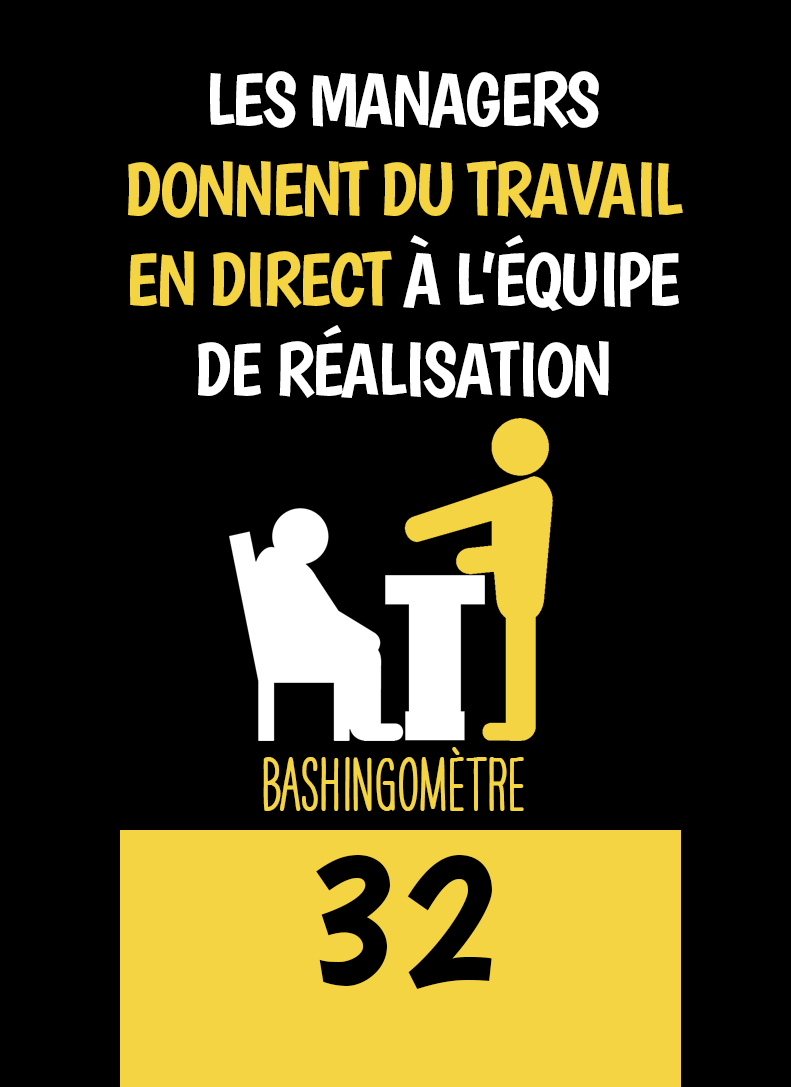
<style>
.page{position:relative;width:791px;height:1087px;background:#000000}
.page>*{position:absolute;margin:0}
.t1{font:75px "Boogaloo-Regular";letter-spacing:-0.04em;color:#f4d443}
.t2{font:75px "Boogaloo-Regular";letter-spacing:-0.04em;color:#ffffff}
.t3{font:66.7px "HAVEANICEDAYTallW04-Bold";color:#f4d443}
.t4{font:200px "Boogaloo-Regular";color:#000000}
</style>
<div class="page">
<p class="t1" style="left:128px;top:71px;width:555px;height:327px;text-align:center"><span class="t2">LES MANAGERS </span>DONNENT DU TRAVAIL EN DIRECT<span class="t2"> À L’ÉQUIPE DE RÉALISATION</span></p>
<p class="t3" style="left:263px;top:747px;width:261px;height:64px">BASHINgomètre</p>
<p class="t4" style="left:316px;top:855px;width:176px;height:134px">32</p>
</div>
